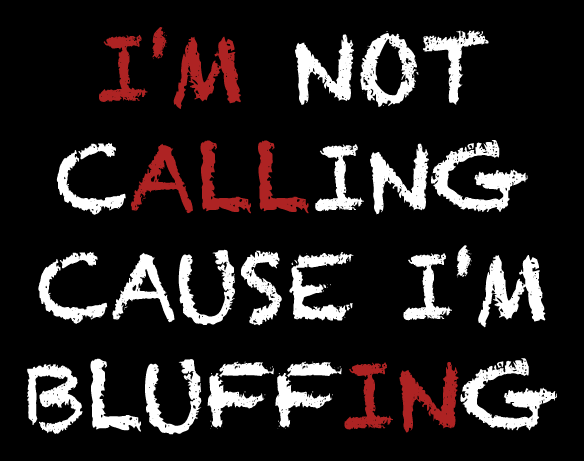
<style>
.page{position:relative;width:584px;height:461px;background:#000000}
.page>*{position:absolute;margin:0}
.t1{font:91px "Chalkduster";color:#ffffff}
.t2{font:91px "Chalkduster";color:#ae2323}
</style>
<div class="page">
<p class="t1" style="left:27px;top:27px;width:530px;height:408px;text-align:center"><span class="t2">I'M</span> NOT<br>C<span class="t2">ALL</span>ING<br>CAUSE I'M<br>BLUFF<span class="t2">IN</span>G</p>
</div>
